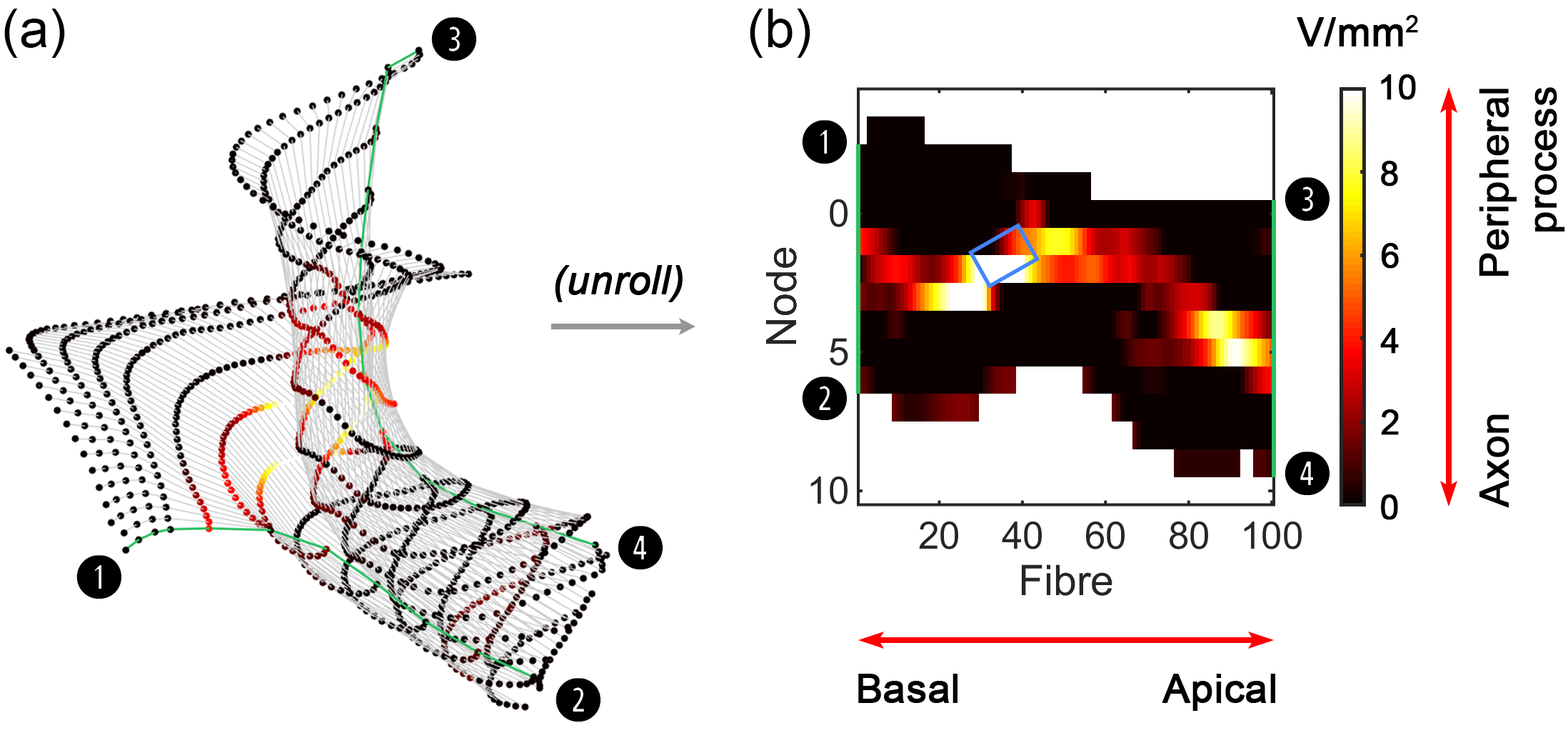
<style>
.page{position:relative;width:1568px;height:743px;background:#ffffff}
.page>*{position:absolute;margin:0}
.t1{font:53.3px "ArialMT";color:#000000}
.t2{font:57.1px "CombiNumerals-Bold";color:#000000;font-weight:bold}
.t3{font:40px "ArialMT";color:#000000;font-weight:bold}
.t4{font:34.3px "ArialMT";color:#000000;font-weight:bold}
.t5{font:40px "Arial-ItalicMT";color:#000000;font-weight:bold}
</style>
<div class="page">
<p class="t1" style="left:4px;top:9px;width:61px;height:49px">(a)</p>
<p class="t2" style="left:431px;top:17px;width:45px;height:44px">e</p>
<p class="t1" style="left:750px;top:9px;width:60px;height:49px">(b)</p>
<p class="t3" style="left:1297px;top:15px;width:121px;height:31px">V/mm2</p>
<p class="t4" style="left:1381px;top:74px;width:35px;height:26px">10</p>
<p class="t3" style="left:1479px;top:87px;width:86px;height:189px;text-align:right;rotate:-90deg">Peripheral<br>process</p>
<p class="t2" style="left:802px;top:120px;width:45px;height:44px">q</p>
<p class="t4" style="left:1381px;top:161px;width:17px;height:25px">8</p>
<p class="t2" style="left:1285px;top:177px;width:45px;height:44px">e</p>
<p class="t4" style="left:1381px;top:243px;width:18px;height:25px">6</p>
<p class="t5" style="left:555px;top:265px;width:128px;height:37px">(unroll)</p>
<p class="t4" style="left:1380px;top:328px;width:19px;height:25px">4</p>
<p class="t2" style="left:802px;top:376px;width:45px;height:44px">w</p>
<p class="t4" style="left:1381px;top:409px;width:18px;height:26px">2</p>
<p class="t3" style="left:1479px;top:414px;width:30px;height:94px;rotate:-90deg">Axon</p>
<p class="t2" style="left:1285px;top:451px;width:45px;height:44px">r</p>
<p class="t4" style="left:1381px;top:494px;width:17px;height:26px">0</p>
<p class="t2" style="left:618px;top:526px;width:45px;height:43px">r</p>
<p class="t2" style="left:76px;top:555px;width:45px;height:43px">q</p>
<p class="t2" style="left:556px;top:678px;width:44px;height:43px">w</p>
<p class="t3" style="left:858px;top:673px;width:100px;height:30px">Basal</p>
<p class="t3" style="left:1162px;top:673px;width:113px;height:37px">Apical</p>
</div>
